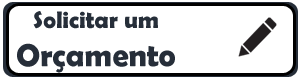
<style>
.page{position:relative;width:300px;height:80px;background:#ffffff}
.page>*{position:absolute;margin:0}
.t1{font:24px/9px "BerlinSansFBDemi-Bold";color:#262e39}
.t2{font:32px "BerlinSansFBDemi-Bold";color:#262e39}
</style>
<div class="page">
<p class="t1" style="left:17px;top:11px;width:158px;height:62px;text-align:center">Solicitar um<br><span class="t2">Orçamento</span></p>
</div>
